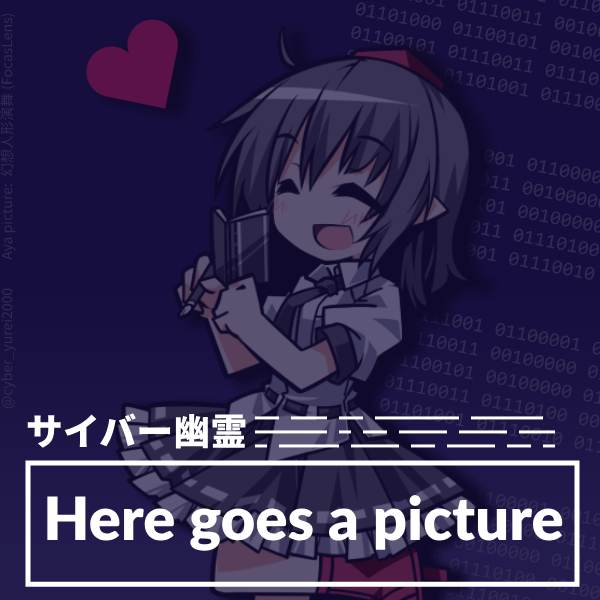
<style>
.page{position:relative;width:600px;height:600px;background:#150e3e}
.page>*{position:absolute;margin:0}
.t1{font:14px "NotoSansJP-Regular";color:#312b53}
.t2{font:37px "NotoSansJP-Black";color:#ffffff}
.t3{font:12px "NotoSansJP-Black";color:#ffffff}
.t4{font:59.8px "Lato-Black";color:#ffffff}
</style>
<div class="page">
<p class="t1" style="left:0px;top:14px;width:16px;height:395px;rotate:-90deg">@cyber_yurei2000　　Aya picture:  幻想人形演舞 (FocasLens)</p>
<p class="t2" style="left:27px;top:413px;width:219px;height:36px">サイバー幽霊</p>
<p class="t3" style="left:255px;top:416px;width:300px;height:32px">▂▂　▂▂▂　▂▂　▂▂▂▂▂▂▂　▂▂▂▂▂▂　<br>▂▂▂▂▂▂　▂　▂▂　▂▂▂▂　▂▂▂▂　▂▂▂<br>▂　▂▂▂▂▂　▂▂▂▂　▂▂　▂▂▂▂　▂▂　▂</p>
<p class="t4" style="left:47px;top:495px;width:516px;height:56px">Here goes a picture</p>
</div>
